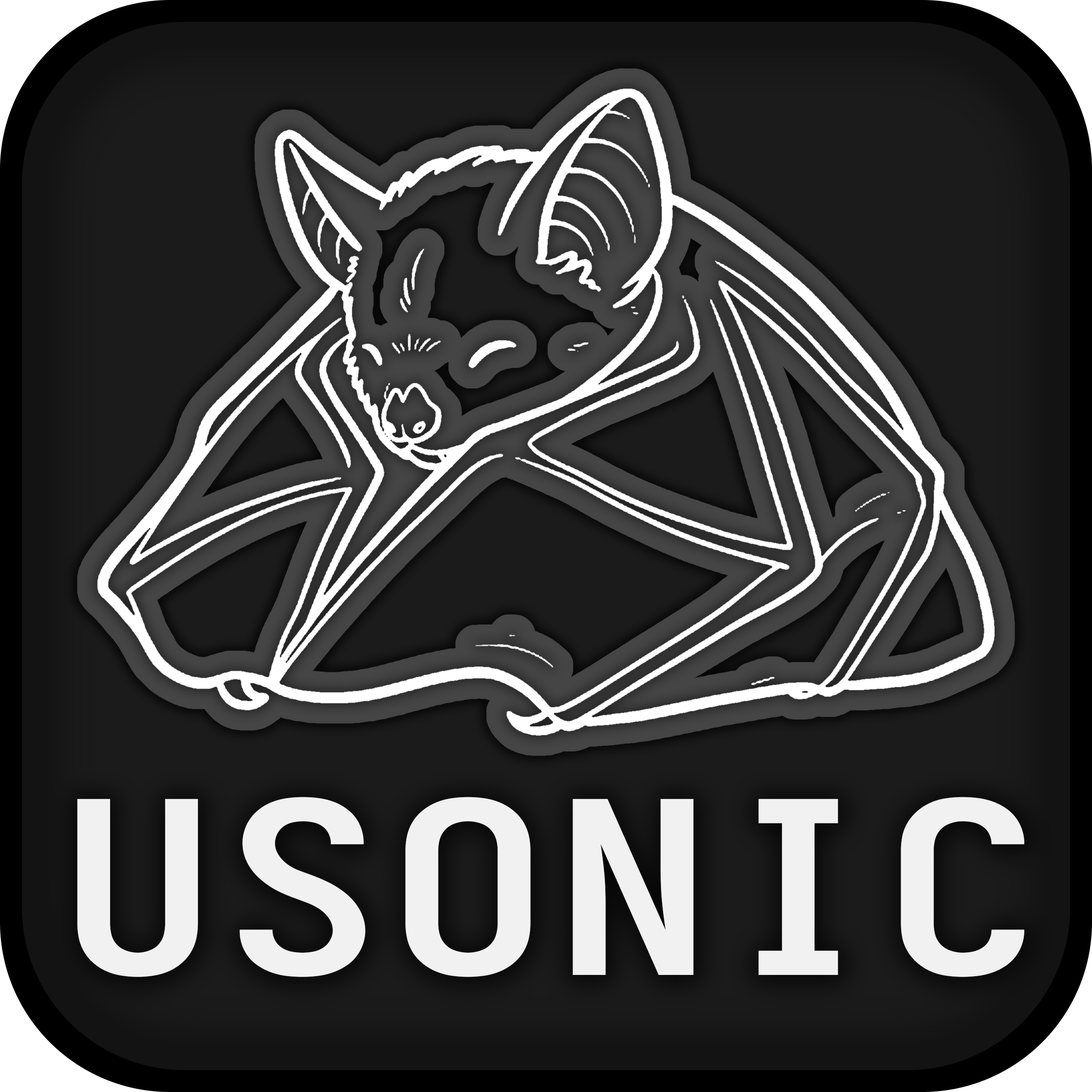
<style>
.page{position:relative;width:1092px;height:1092px}
.page>*{position:absolute;margin:0}
.t1{font:239.4px "AdwaitaMono-Regular";color:#f1f1f1;scale:1.15 1}
</style>
<div class="page">
<p class="t1" style="left:77px;top:797px;width:948px;height:181px">USONIC</p>
<p class="t1" style="left:77px;top:797px;width:948px;height:181px">USONIC</p>
</div>
